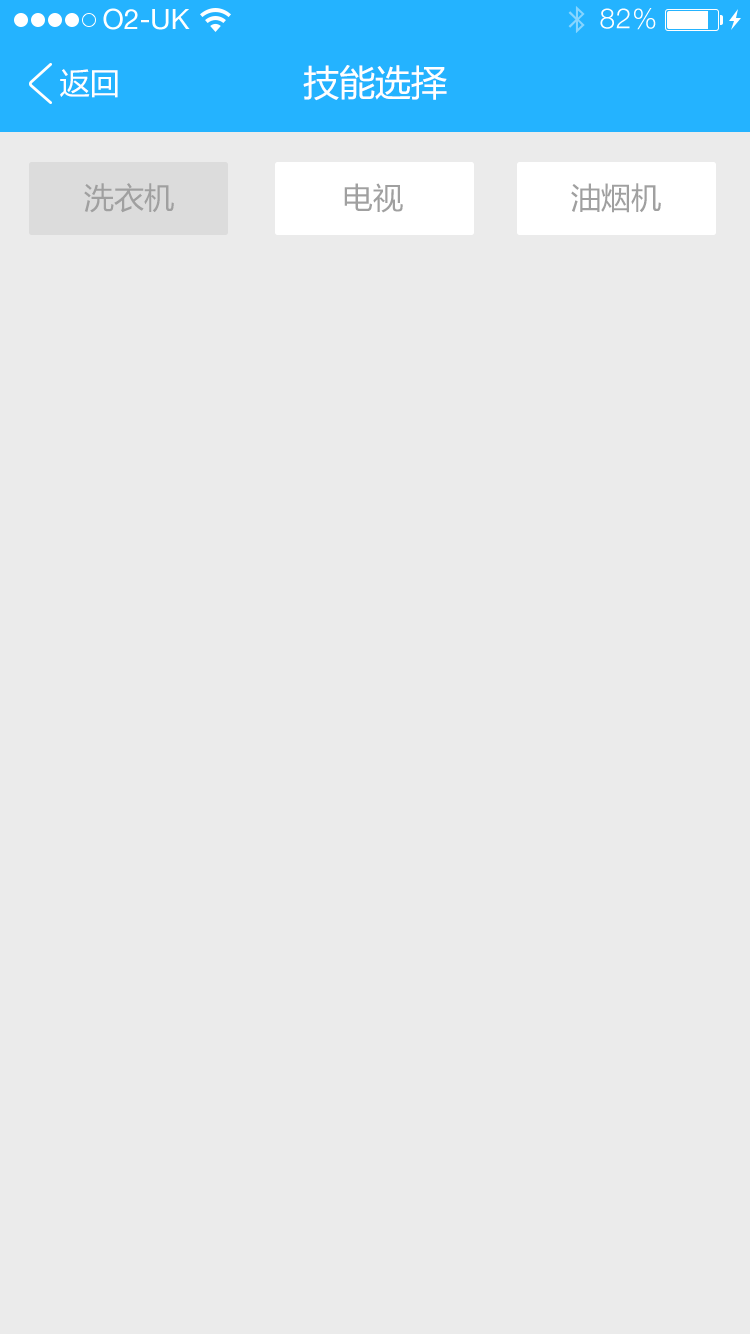
<style>
.page{position:relative;width:750px;height:1334px;background:#ebebeb}
.page>*{position:absolute;margin:0}
.t1{font:36px "MicrosoftYaHei";color:#ffffff}
.t2{font:30px "MicrosoftYaHei";color:#ffffff}
.t3{font:30px "MicrosoftYaHei";color:#a0a0a0}
</style>
<div class="page">
<p class="t1" style="left:303px;top:65px;width:144px;height:36px">技能选择</p>
<p class="t2" style="left:60px;top:69px;width:58px;height:29px">返回</p>
<p class="t3" style="left:84px;top:183px;width:90px;height:30px">洗衣机</p>
<p class="t3" style="left:344px;top:183px;width:59px;height:30px">电视</p>
<p class="t3" style="left:571px;top:183px;width:90px;height:30px">油烟机</p>
</div>
